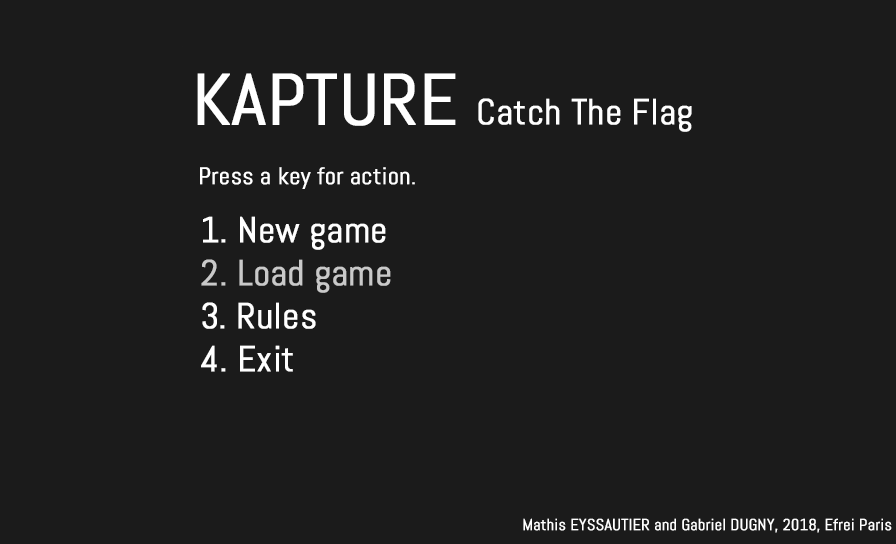
<style>
.page{position:relative;width:896px;height:544px;background:#1b1b1b}
.page>*{position:absolute;margin:0}
.t1{font:36px "Abel-Regular";color:#ffffff;font-weight:bold}
.t2{font:72px "Abel-Regular";color:#ffffff;font-weight:bold}
.t3{font:24px "Abel-Regular";color:#ffffff;font-weight:bold}
.t4{font:36px "Abel-Regular";color:#c9c9c9;font-weight:bold}
.t5{font:16px "Abel-Regular";color:#ffffff;font-weight:bold}
</style>
<div class="page">
<p class="t1" style="left:197px;top:73px;width:495px;height:59px"><span class="t2">KAPTURE </span>Catch The Flag</p>
<p class="t3" style="left:200px;top:167px;width:215px;height:22px">Press a key for action.</p>
<p class="t1" style="left:201px;top:216px;width:190px;height:156px">1. New game<br><span class="t4">2. Load game<br></span>3. Rules<br>4. Exit</p>
<p class="t5" style="left:523px;top:518px;width:369px;height:15px">Mathis EYSSAUTIER and Gabriel DUGNY, 2018, Efrei Paris</p>
</div>
